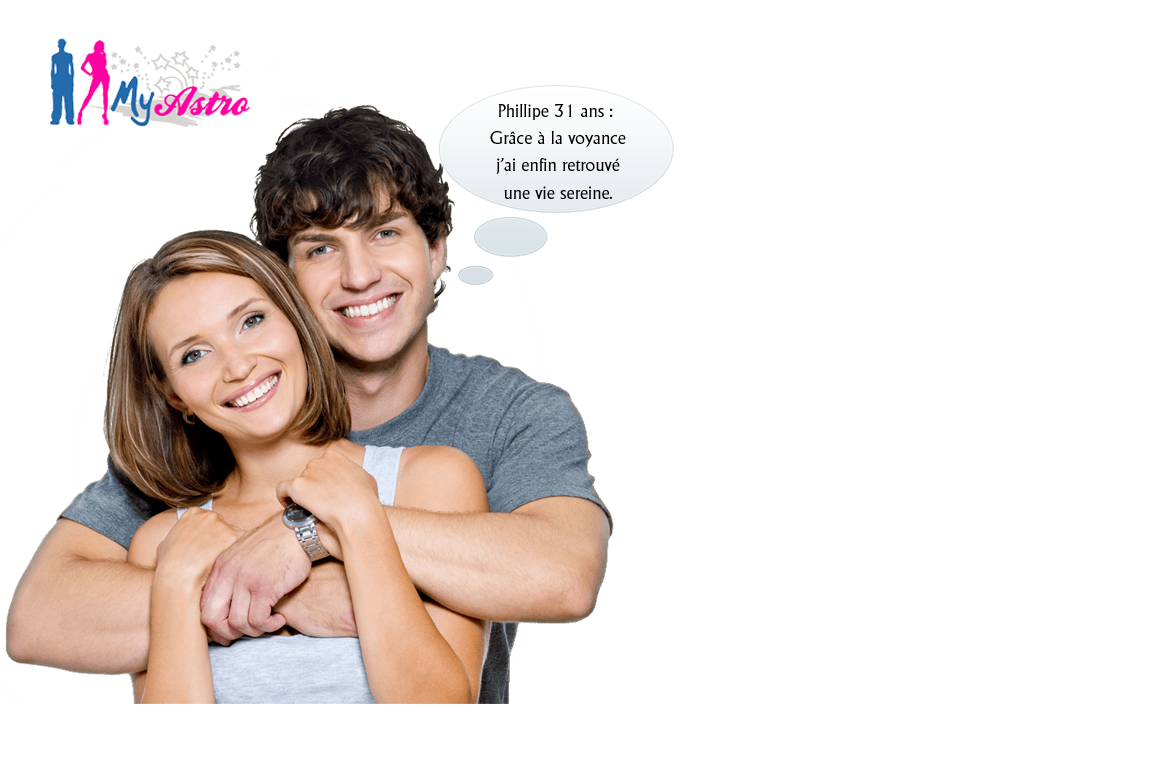
<style>
.page{position:relative;width:1156px;height:779px;background:#ffffff}
.page>*{position:absolute;margin:0}
.t1{font:18px/13.6px "AdelonSerial";color:#000000}
</style>
<div class="page">
<p class="t1" style="left:490px;top:104px;width:136px;height:95px;text-align:center">Phillipe 31 ans : <br><br>Grâce à la voyance<br><br>j'ai enfin retrouvé<br><br>une vie sereine.</p>
</div>
